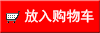
<style>
.page{position:relative;width:100px;height:33px;background:#ff0000}
.page>*{position:absolute;margin:0}
.t1{font:14px "SimHei";color:#ffffff}
</style>
<div class="page">
<p class="t1" style="left:24px;top:9px;width:70px;height:14px">放入购物车</p>
</div>
